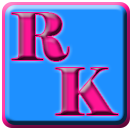
<style>
.page{position:relative;width:133px;height:131px;background:#1e90ff}
.page>*{position:absolute;margin:0}
.t1{font:65px "Elephant-Regular"}
</style>
<div class="page">
<p class="t1" style="left:11px;top:13px;width:58px;height:48px">R</p>
<p class="t1" style="left:55px;top:68px;width:63px;height:47px">K</p>
</div>
